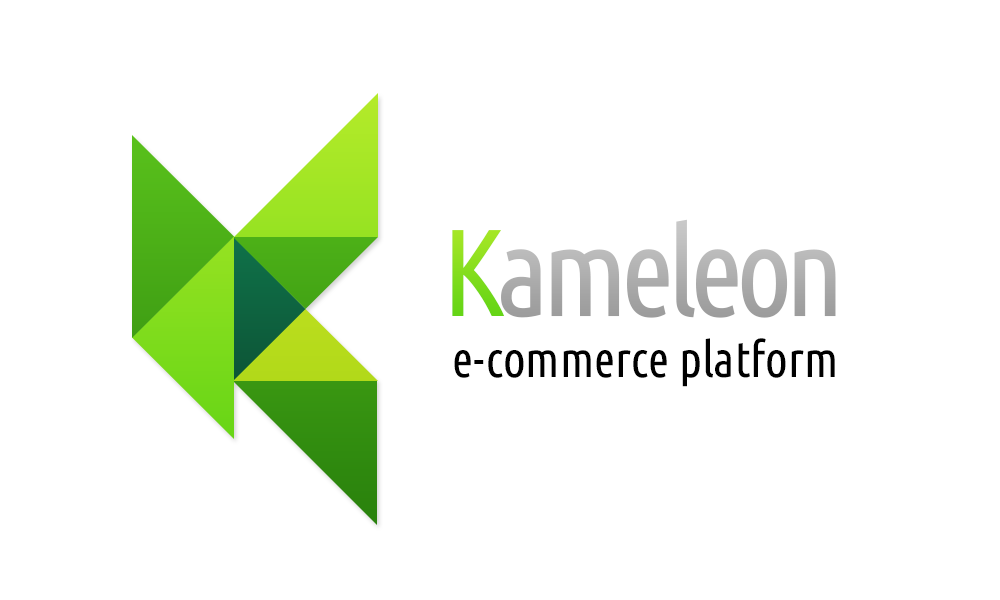
<style>
.page{position:relative;width:1000px;height:600px;background:#ffffff}
.page>*{position:absolute;margin:0}
.t1{font:123.6px "UbuntuCondensed-Regular";letter-spacing:-0.06em;color:#b2b2b2}
.t2{font:123.6px "UbuntuCondensed-Regular";letter-spacing:-0.06em;color:#87de1e}
.t3{font:49.9px "UbuntuCondensed-Regular";color:#000000}
</style>
<div class="page">
<p class="t1" style="left:452px;top:219px;width:384px;height:99px"><span class="t2">K</span>ameleon</p>
<p class="t3" style="left:454px;top:338px;width:381px;height:49px">e-commerce platform</p>
</div>
